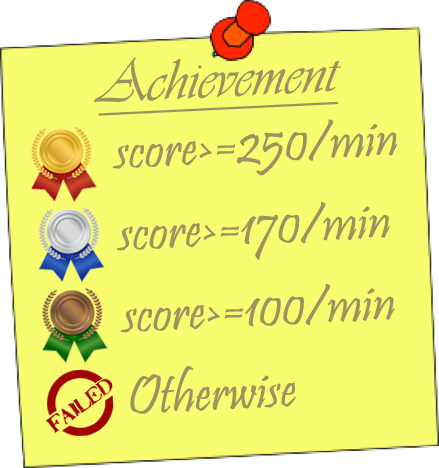
<style>
.page{position:relative;width:439px;height:468px;background:#f8fc6f}
.page>*{position:absolute;margin:0}
.t1{font:60px "Vivaldii";color:#a29060;text-decoration:underline}
.t2{font:55px/32px "Pristina-Regular";color:#a29060}
</style>
<div class="page">
<p class="t1" style="left:93px;top:57px;width:249px;height:59px;rotate:-3deg">Achievement</p>
<p class="t2" style="left:112px;top:119px;width:286px;height:295px;rotate:-3deg">score&gt;=250/min<br>score&gt;=170/min<br>score&gt;=100/min<br>Otherwise</p>
</div>
